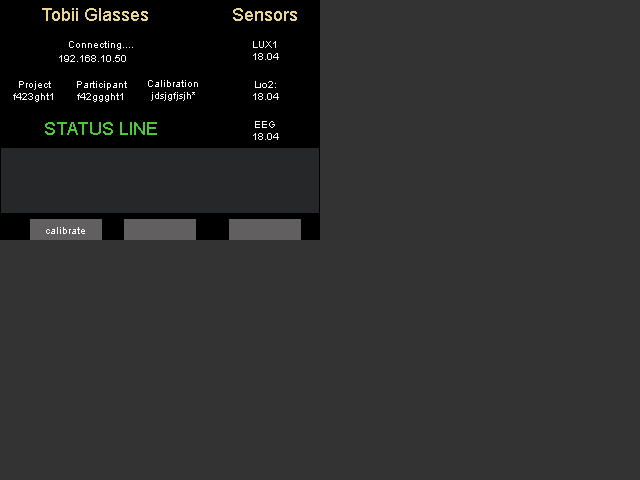
<style>
.page{position:relative;width:640px;height:480px;background:#333333}
.page>*{position:absolute;margin:0}
.t1{font:18px "ArialMT";color:#e8d591}
.t2{font:10px "ArialMT";color:#ffffff}
.t3{font:18px "ArialMT";color:#4eca39}
</style>
<div class="page">
<p class="t1" style="left:42px;top:8px;width:106px;height:13px">Tobii Glasses</p>
<p class="t1" style="left:233px;top:8px;width:64px;height:13px">Sensors</p>
<p class="t2" style="left:69px;top:41px;width:64px;height:9px">Connecting....</p>
<p class="t2" style="left:253px;top:41px;width:26px;height:19px;text-align:center">LUX1<br>18.04</p>
<p class="t2" style="left:59px;top:55px;width:67px;height:7px">192.168.10.50</p>
<p class="t2" style="left:13px;top:81px;width:40px;height:21px;text-align:center">Project<br>f423ght1</p>
<p class="t2" style="left:77px;top:81px;width:50px;height:21px;text-align:center">Participant<br>f42ggght1</p>
<p class="t2" style="left:148px;top:80px;width:50px;height:21px;text-align:center">Calibration<br>jdsjgfjsjh*</p>
<p class="t2" style="left:253px;top:81px;width:26px;height:19px;text-align:center">Lוס2:<br>18.04</p>
<p class="t3" style="left:45px;top:122px;width:112px;height:13px">STATUS LINE</p>
<p class="t2" style="left:253px;top:121px;width:26px;height:19px;text-align:center">EEG<br>18.04</p>
<p class="t2" style="left:46px;top:227px;width:39px;height:7px">calibrate</p>
</div>
